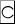
<style>
.page{position:relative;width:15px;height:24px;background:#ffffff}
.page>*{position:absolute;margin:0}
.t1{font:18px "CutC";color:#000000}
</style>
<div class="page">
<p class="t1" style="left:1px;top:6px;width:13px;height:13px">C</p>
</div>
